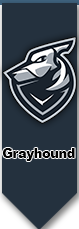
<style>
.page{position:relative;width:79px;height:229px;background:#24313e}
.page>*{position:absolute;margin:0}
.t1{font:12.5px "Arial-Black";letter-spacing:-0.01em;color:#000000}
</style>
<div class="page">
<p class="t1" style="left:2px;top:148px;width:73px;height:13px">Grayhound</p>
</div>
